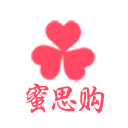
<style>
.page{position:relative;width:128px;height:128px;background:#ffffff}
.page>*{position:absolute;margin:0}
.t1{font:34px "STXingkai";letter-spacing:0.02em;color:#ff4965}
</style>
<div class="page">
<p class="t1" style="left:25px;top:83px;width:80px;height:31px">蜜思购</p>
</div>
